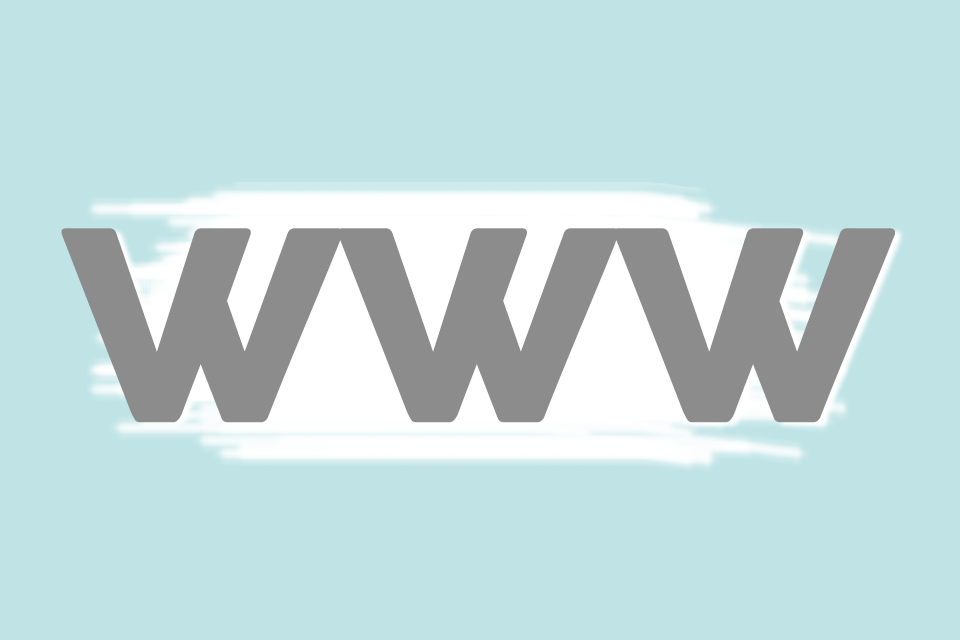
<style>
.page{position:relative;width:960px;height:640px;background:#c0e4e6}
.page>*{position:absolute;margin:0}
.t1{font:260.9px "COCOGOOSE";letter-spacing:-0.04em;color:#8c8c8c}
</style>
<div class="page">
<p class="t1" style="left:61px;top:228px;width:834px;height:195px">WWW</p>
</div>
